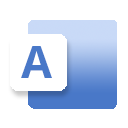
<style>
.page{position:relative;width:128px;height:128px;background:#ffffff}
.page>*{position:absolute;margin:0}
.t1{font:45px "NotoSans-Bold";color:#4978c8}
</style>
<div class="page">
<p class="t1" style="left:21px;top:46px;width:31px;height:32px">A</p>
</div>
